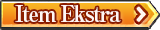
<style>
.page{position:relative;width:160px;height:30px}
.page>*{position:absolute;margin:0}
.t1{font:22px "RyuminPro-ExBold";letter-spacing:-0.08em;color:#fff6f3}
</style>
<div class="page">
<p class="t1" style="left:15px;top:5px;width:106px;height:18px">Item Ekstra</p>
</div>
